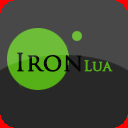
<style>
.page{position:relative;width:128px;height:128px;background:#282828}
.page>*{position:absolute;margin:0}
.t1{font:24px "TrajanPro-Regular";color:#070707;font-weight:bold}
.t2{font:14px "TrajanPro-Regular";color:#55b217;font-weight:bold}
</style>
<div class="page">
<p class="t1" style="left:17px;top:52px;width:96px;height:20px">Iron<span class="t2">Lua</span></p>
</div>
